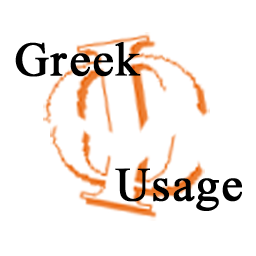
<style>
.page{position:relative;width:256px;height:256px;background:#ffffff}
.page>*{position:absolute;margin:0}
.t1{font:47.5px "TimesNewRomanPSMT";letter-spacing:0.02em;color:#000000;font-weight:bold}
</style>
<div class="page">
<p class="t1" style="left:15px;top:42px;width:126px;height:35px">Greek</p>
<p class="t1" style="left:115px;top:168px;width:127px;height:43px">Usage</p>
</div>
